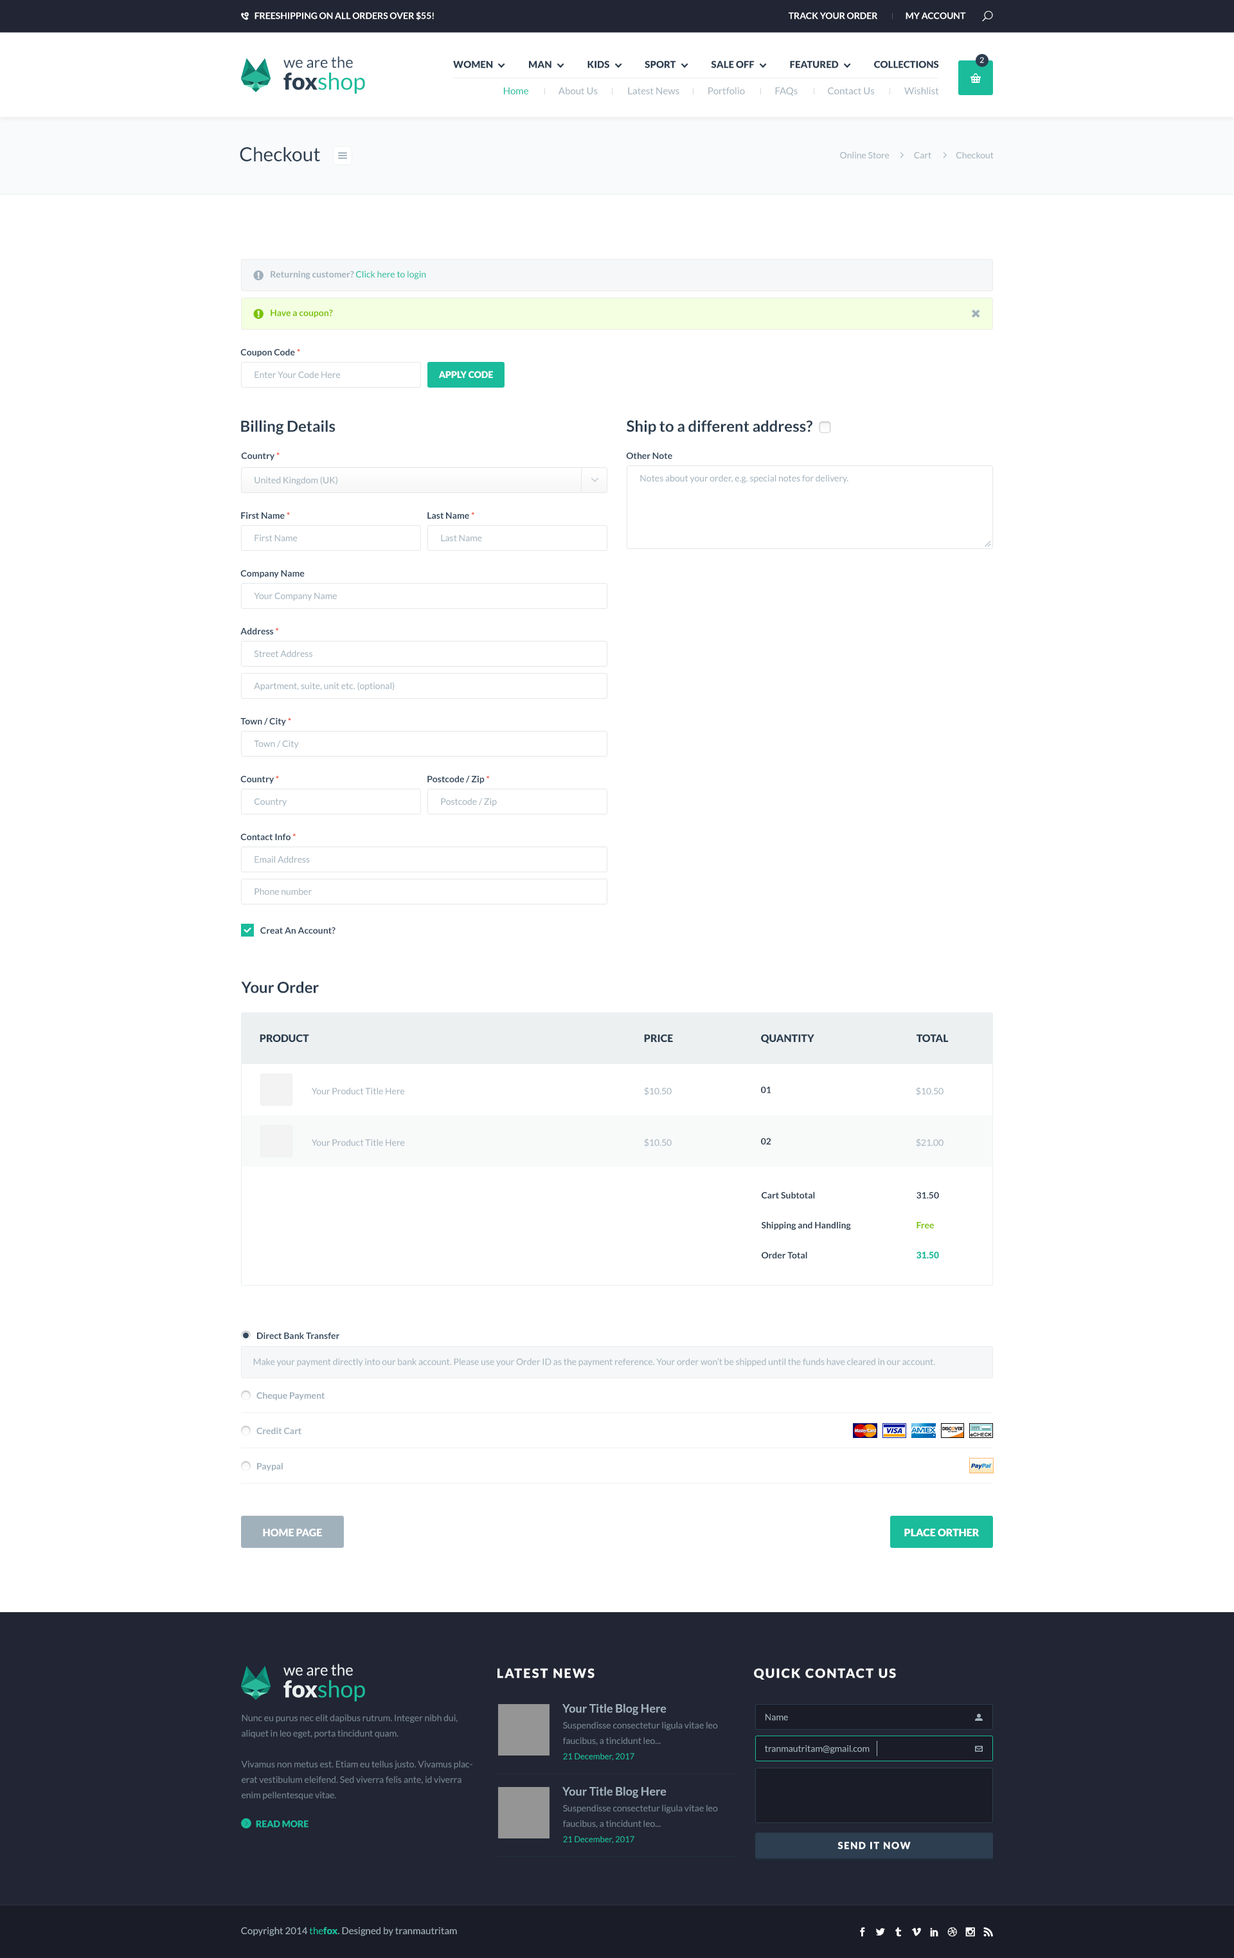
<style>
.page{position:relative;width:1234px;height:1958px;background:#ffffff}
.page>*{position:absolute;margin:0}
.t1{font:9px "Lato-Bold";color:#ffffff}
.t2{font:15.4px/21.9px "Lato-Regular";color:#34495e}
.t3{font:23.1px/21.9px "Lato-Black";color:#2c3e50}
.t4{font:23.1px/21.9px "Lato-Regular";color:#1abc9c}
.t5{font:9.6px "Lato-Black";color:#2c3e50;text-transform:uppercase}
.t6{font:7.7px "Lato-Regular";color:#ffffff}
.t7{font:9.6px "Lato-Regular";color:#a1b1bc}
.t8{font:9.6px "Lato-Regular";color:#1abc9c}
.t9{font:19.3px "Lato-Regular";color:#2c3e50}
.t10{font:9px "Lato-Regular";color:#a1b1bc}
.t11{font:9px "Lato-Bold";color:#a1b1bc}
.t12{font:9px "Lato-Regular";color:#1abc9c}
.t13{font:9px "Lato-Bold";color:#7bc200}
.t14{font:9px "Lato-Bold";color:#34495e}
.t15{font:9px "Lato-Bold";color:#f54e33}
.t16{font:9px "Lato-Black";color:#ffffff;text-transform:uppercase}
.t17{font:15.4px "Lato-Bold";color:#2c3e50}
.t18{font:10.3px "Lato-Black";color:#2c3e50}
.t19{font:9px "Lato-Bold";color:#2c3e50}
.t20{font:9px/29.9px "Lato-Bold";color:#2c3e50}
.t21{font:9px/29.9px "Lato-Bold";color:#7bc200}
.t22{font:9px/29.9px "Lato-Black";color:#1abc9c}
.t23{font:10.3px "Lato-Black";color:#ffffff}
.t24{font:15.4px/21.9px "Lato-Regular";color:#ecf0f1}
.t25{font:23.1px/21.9px "Lato-Black";color:#ecf0f1}
.t26{font:12.9px "Lato-Black";letter-spacing:0.1em;color:#ffffff;text-transform:uppercase}
.t27{font:11.6px "Lato-Bold";color:#a1b1bc}
.t28{font:9px/15.4px "Lato-Regular";color:#758590}
.t29{font:8.4px/15.4px "Lato-Regular";color:#1abc9c}
.t30{font:9px "Lato-Black";color:#1abc9c}
.t31{font:9.6px "Lato-Black";letter-spacing:0.1em;color:#ffffff}
.t32{font:9.6px "Lato-Black";color:#1abc9c}
</style>
<div class="page">
<p class="t1" style="left:255px;top:12px;width:179px;height:9px">FREESHIPPING ON ALL ORDERS OVER $55!</p>
<p class="t1" style="left:789px;top:12px;width:177px;height:7px">TRACK YOUR ORDER                MY ACCOUNT</p>
<p class="t2" style="left:284px;top:56px;width:81px;height:38px">we are the<br><span class="t3">fox</span><span class="t4">shop</span></p>
<p class="t5" style="left:453px;top:60px;width:486px;height:8px">Women                   Man                   KIDS                   SPORT                   Sale Off                   FEATURED                   COLLECTIONS</p>
<p class="t6" style="left:980px;top:57px;width:4px;height:6px">2</p>
<p class="t7" style="left:504px;top:87px;width:435px;height:9px"><span class="t8">Home</span>                About Us                Latest News               Portfolio                FAQs                Contact Us                Wishlist</p>
<p class="t9" style="left:240px;top:147px;width:80px;height:14px">Checkout</p>
<p class="t10" style="left:840px;top:152px;width:154px;height:7px">Online Store              Cart              Checkout</p>
<p class="t11" style="left:271px;top:271px;width:155px;height:9px">Returning customer? <span class="t12">Click here to login</span></p>
<p class="t13" style="left:271px;top:309px;width:62px;height:9px">Have a coupon?</p>
<p class="t14" style="left:240px;top:348px;width:60px;height:9px">Coupon Code <span class="t15">*</span></p>
<p class="t10" style="left:255px;top:371px;width:86px;height:7px">Enter Your Code Here</p>
<p class="t16" style="left:438px;top:371px;width:55px;height:7px">apply code</p>
<p class="t17" style="left:241px;top:420px;width:95px;height:15px">Billing Details</p>
<p class="t17" style="left:627px;top:420px;width:186px;height:15px">Ship to a different address?</p>
<p class="t14" style="left:241px;top:452px;width:39px;height:9px">Country <span class="t15">*</span></p>
<p class="t14" style="left:626px;top:452px;width:46px;height:7px">Other Note</p>
<p class="t10" style="left:255px;top:476px;width:83px;height:9px">United Kingdom (UK)</p>
<p class="t10" style="left:640px;top:474px;width:209px;height:9px">Notes about your order, e.g. special notes for delivery.</p>
<p class="t14" style="left:241px;top:512px;width:49px;height:7px">First Name <span class="t15">*</span></p>
<p class="t14" style="left:428px;top:512px;width:46px;height:7px">Last Name <span class="t15">*</span></p>
<p class="t10" style="left:255px;top:534px;width:43px;height:7px">First Name</p>
<p class="t10" style="left:441px;top:535px;width:41px;height:6px">Last Name</p>
<p class="t14" style="left:240px;top:570px;width:65px;height:9px">Company Name</p>
<p class="t10" style="left:254px;top:593px;width:83px;height:8px">Your Company Name</p>
<p class="t14" style="left:240px;top:627px;width:39px;height:7px">Address <span class="t15">*</span></p>
<p class="t10" style="left:254px;top:650px;width:58px;height:7px">Street Address</p>
<p class="t10" style="left:254px;top:682px;width:141px;height:9px">Apartment, suite, unit etc. (optional)</p>
<p class="t14" style="left:240px;top:717px;width:51px;height:9px">Town / City <span class="t15">*</span></p>
<p class="t10" style="left:254px;top:740px;width:45px;height:9px">Town / City</p>
<p class="t14" style="left:240px;top:775px;width:39px;height:9px">Country <span class="t15">*</span></p>
<p class="t14" style="left:428px;top:775px;width:62px;height:9px">Postcode / Zip <span class="t15">*</span></p>
<p class="t10" style="left:441px;top:798px;width:56px;height:9px">Postcode / Zip</p>
<p class="t10" style="left:255px;top:798px;width:32px;height:9px">Country</p>
<p class="t14" style="left:240px;top:833px;width:56px;height:7px">Contact Info <span class="t15">*</span></p>
<p class="t10" style="left:255px;top:856px;width:55px;height:7px">Email Address</p>
<p class="t10" style="left:255px;top:888px;width:57px;height:7px">Phone number</p>
<p class="t14" style="left:260px;top:927px;width:76px;height:7px">Creat An Account?</p>
<p class="t17" style="left:241px;top:982px;width:78px;height:11px">Your Order</p>
<p class="t18" style="left:260px;top:1034px;width:49px;height:8px">PRODUCT</p>
<p class="t18" style="left:644px;top:1034px;width:29px;height:8px">PRICE</p>
<p class="t18" style="left:761px;top:1034px;width:54px;height:10px">QUANTITY</p>
<p class="t18" style="left:917px;top:1034px;width:32px;height:8px">TOTAL</p>
<p class="t10" style="left:312px;top:1088px;width:93px;height:7px">Your Product Title Here</p>
<p class="t10" style="left:644px;top:1087px;width:28px;height:9px">$10.50</p>
<p class="t19" style="left:761px;top:1086px;width:10px;height:8px">01</p>
<p class="t10" style="left:916px;top:1087px;width:28px;height:9px">$10.50</p>
<p class="t10" style="left:312px;top:1139px;width:93px;height:7px">Your Product Title Here</p>
<p class="t10" style="left:644px;top:1138px;width:28px;height:10px">$10.50</p>
<p class="t19" style="left:761px;top:1138px;width:10px;height:7px">02</p>
<p class="t10" style="left:916px;top:1138px;width:28px;height:10px">$21.00</p>
<p class="t20" style="left:761px;top:1192px;width:90px;height:67px">Cart Subtotal<br>Shipping and Handling<br>Order Total</p>
<p class="t20" style="left:917px;top:1192px;width:22px;height:67px">31.50<br><span class="t21">Free<br></span><span class="t22">31.50</span></p>
<p class="t14" style="left:257px;top:1332px;width:82px;height:7px">Direct Bank Transfer</p>
<p class="t10" style="left:253px;top:1358px;width:682px;height:9px">Make your payment directly into our bank account. Please use your Order ID as the payment reference. Your order won’t be shipped until the funds have cleared in our account.</p>
<p class="t11" style="left:256px;top:1392px;width:69px;height:9px">Cheque Payment</p>
<p class="t11" style="left:256px;top:1427px;width:46px;height:7px">Credit Cart</p>
<p class="t11" style="left:257px;top:1462px;width:26px;height:10px">Paypal</p>
<p class="t23" style="left:263px;top:1529px;width:59px;height:7px">HOME PAGE</p>
<p class="t23" style="left:905px;top:1529px;width:75px;height:7px">PLACE ORTHER</p>
<p class="t24" style="left:284px;top:1664px;width:81px;height:38px">we are the<br><span class="t25">fox</span><span class="t4">shop</span></p>
<p class="t26" style="left:498px;top:1668px;width:97px;height:11px">Latest News</p>
<p class="t26" style="left:754px;top:1668px;width:142px;height:12px">quick contact us</p>
<p class="t27" style="left:562px;top:1704px;width:105px;height:11px">Your Title Blog Here</p>
<p class="t28" style="left:241px;top:1715px;width:232px;height:85px">Nunc eu purus nec elit dapibus rutrum. Integer nibh dui, aliquet in leo eget, porta tincidunt quam. <br><br>Vivamus non metus est. Etiam eu tellus justo. Vivamus placerat vestibulum eleifend. Sed viverra felis ante, id viverra enim pellentesque vitae.</p>
<p class="t28" style="left:563px;top:1722px;width:155px;height:39px">Suspendisse consectetur ligula vitae leo faucibus, a tincidunt leo...<br><span class="t29">21 December, 2017</span></p>
<p class="t10" style="left:766px;top:1714px;width:22px;height:7px">Name</p>
<p class="t10" style="left:765px;top:1745px;width:105px;height:9px">tranmautritam@gmail.com</p>
<p class="t27" style="left:562px;top:1787px;width:105px;height:11px">Your Title Blog Here</p>
<p class="t28" style="left:563px;top:1805px;width:155px;height:39px">Suspendisse consectetur ligula vitae leo faucibus, a tincidunt leo...<br><span class="t29">21 December, 2017</span></p>
<p class="t30" style="left:256px;top:1821px;width:53px;height:7px">READ MORE</p>
<p class="t31" style="left:838px;top:1842px;width:73px;height:8px">SEND IT NOW</p>
<p class="t7" style="left:241px;top:1927px;width:216px;height:9px">Copyright 2014 <span class="t8">the</span><span class="t32">fox</span>. Designed by tranmautritam</p>
</div>
